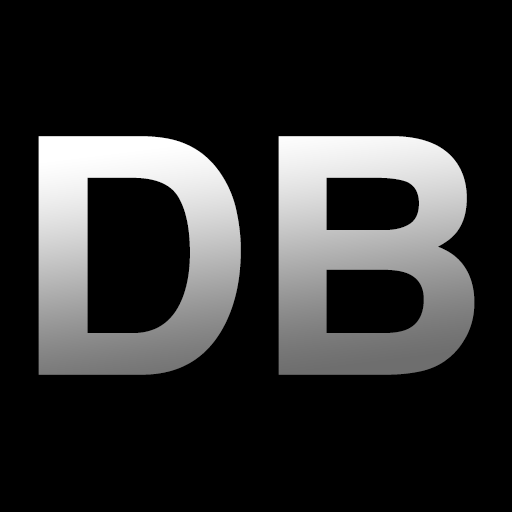
<style>
.page{position:relative;width:512px;height:512px;background:#000000}
.page>*{position:absolute;margin:0}
.t1{font:331px "Helvetica-Bold"}
</style>
<div class="page">
<p class="t1" style="left:38px;top:136px;width:437px;height:239px">DB</p>
</div>
